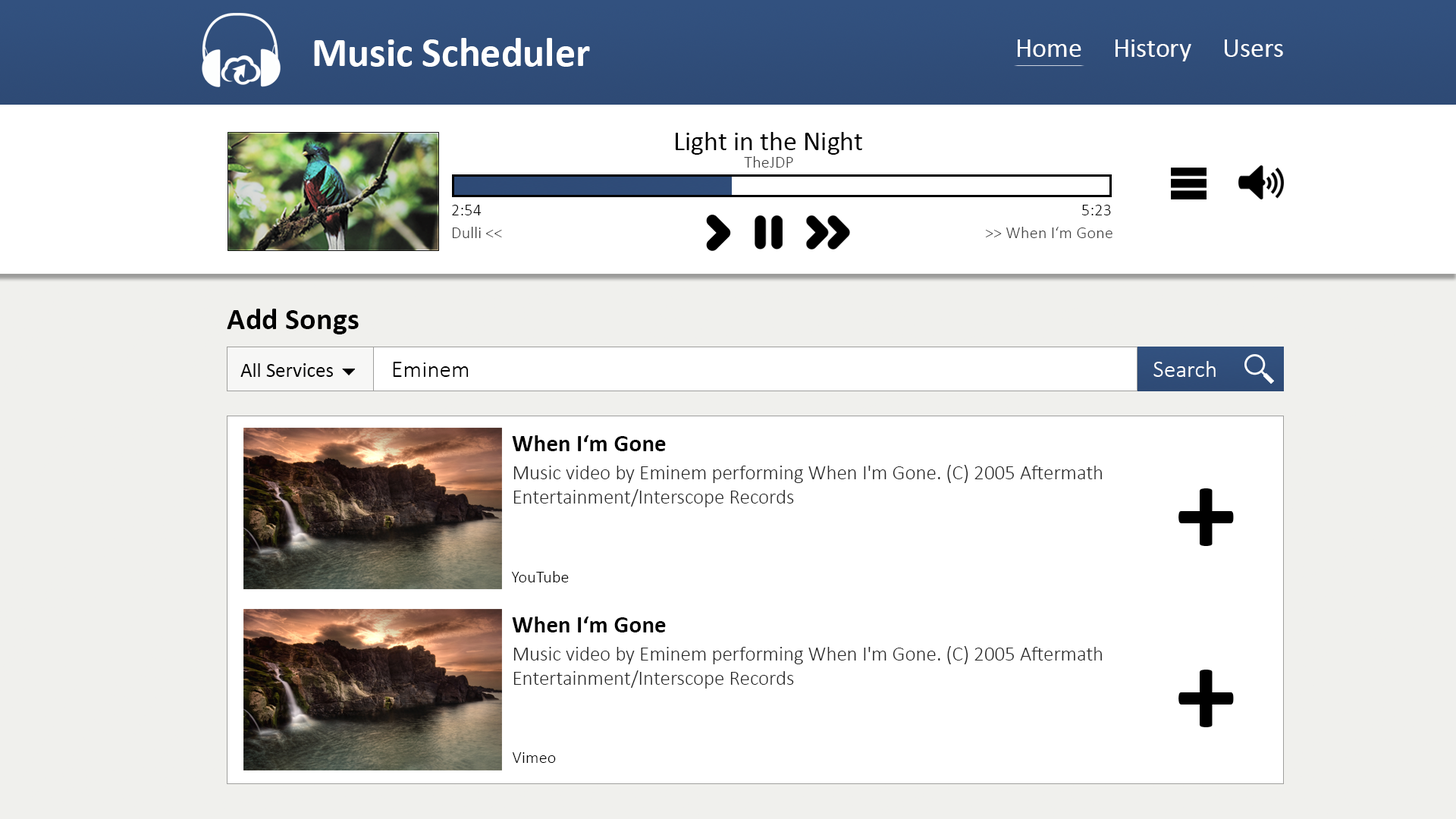
<style>
.page{position:relative;width:1456px;height:819px;background:#ffffff}
.page>*{position:absolute;margin:0}
.t1{font:40.9px "Calibri-Bold";color:#ffffff}
.t2{font:27.2px "Calibri";color:#ffffff}
.t3{font:27.2px "Calibri";color:#000000}
.t4{font:17px "Calibri-Light";color:#424242}
.t5{font:17px "Calibri-Light";color:#000000}
.t6{font:30.6px "Calibri-Bold";color:#000000}
.t7{font:20.4px "Calibri";color:#000000}
.t8{font:23.8px "Calibri-Light";color:#000000}
.t9{font:23.8px "Calibri-Light";color:#ffffff}
.t10{font:23.8px "Calibri-Bold";color:#000000}
.t11{font:20.4px "Calibri-Light";color:#272727}
.t12{font:122.6px "Calibri-Bold";color:#000000}
</style>
<div class="page">
<p class="t1" style="left:314px;top:38px;width:276px;height:29px">Music Scheduler</p>
<p class="t2" style="left:1018px;top:39px;width:265px;height:22px">Home     History     Users</p>
<p class="t3" style="left:676px;top:132px;width:186px;height:23px">Light in the Night</p>
<p class="t4" style="left:744px;top:156px;width:49px;height:12px">TheJDP</p>
<p class="t5" style="left:452px;top:205px;width:30px;height:10px">2:54</p>
<p class="t5" style="left:1082px;top:205px;width:29px;height:10px">5:23</p>
<p class="t4" style="left:452px;top:227px;width:50px;height:11px">Dulli &lt;&lt;</p>
<p class="t4" style="left:986px;top:227px;width:126px;height:11px">&gt;&gt; When I‘m Gone</p>
<p class="t6" style="left:227px;top:309px;width:132px;height:25px">Add Songs</p>
<p class="t7" style="left:240px;top:363px;width:93px;height:14px">All Services</p>
<p class="t8" style="left:393px;top:362px;width:76px;height:15px">Eminem</p>
<p class="t9" style="left:1153px;top:361px;width:63px;height:16px">Search</p>
<p class="t10" style="left:512px;top:435px;width:154px;height:16px">When I‘m Gone</p>
<p class="t11" style="left:513px;top:465px;width:589px;height:42px">Music video by Eminem performing When I'm Gone. (C) 2005 Aftermath Entertainment/Interscope Records</p>
<p class="t12" style="left:1178px;top:488px;width:56px;height:58px">+</p>
<p class="t5" style="left:511px;top:571px;width:58px;height:11px">YouTube</p>
<p class="t10" style="left:512px;top:617px;width:154px;height:15px">When I‘m Gone</p>
<p class="t11" style="left:513px;top:646px;width:589px;height:43px">Music video by Eminem performing When I'm Gone. (C) 2005 Aftermath Entertainment/Interscope Records</p>
<p class="t12" style="left:1178px;top:670px;width:56px;height:57px">+</p>
<p class="t5" style="left:513px;top:752px;width:43px;height:11px">Vimeo</p>
</div>
